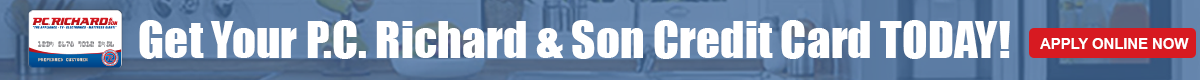
<style>
.page{position:relative;width:1200px;height:80px;background:#ffffff}
.page>*{position:absolute;margin:0}
.t1{font:47.3px "Impact";color:#ffffff}
.t2{font:14.8px "Arial-BoldMT";color:#ffffff}
</style>
<div class="page">
<p class="t1" style="left:139px;top:20px;width:871px;height:39px">Get Your P.C. Richard &amp; Son Credit Card TODAY!</p>
<p class="t2" style="left:1040px;top:38px;width:149px;height:11px">APPLY ONLINE NOW</p>
</div>
